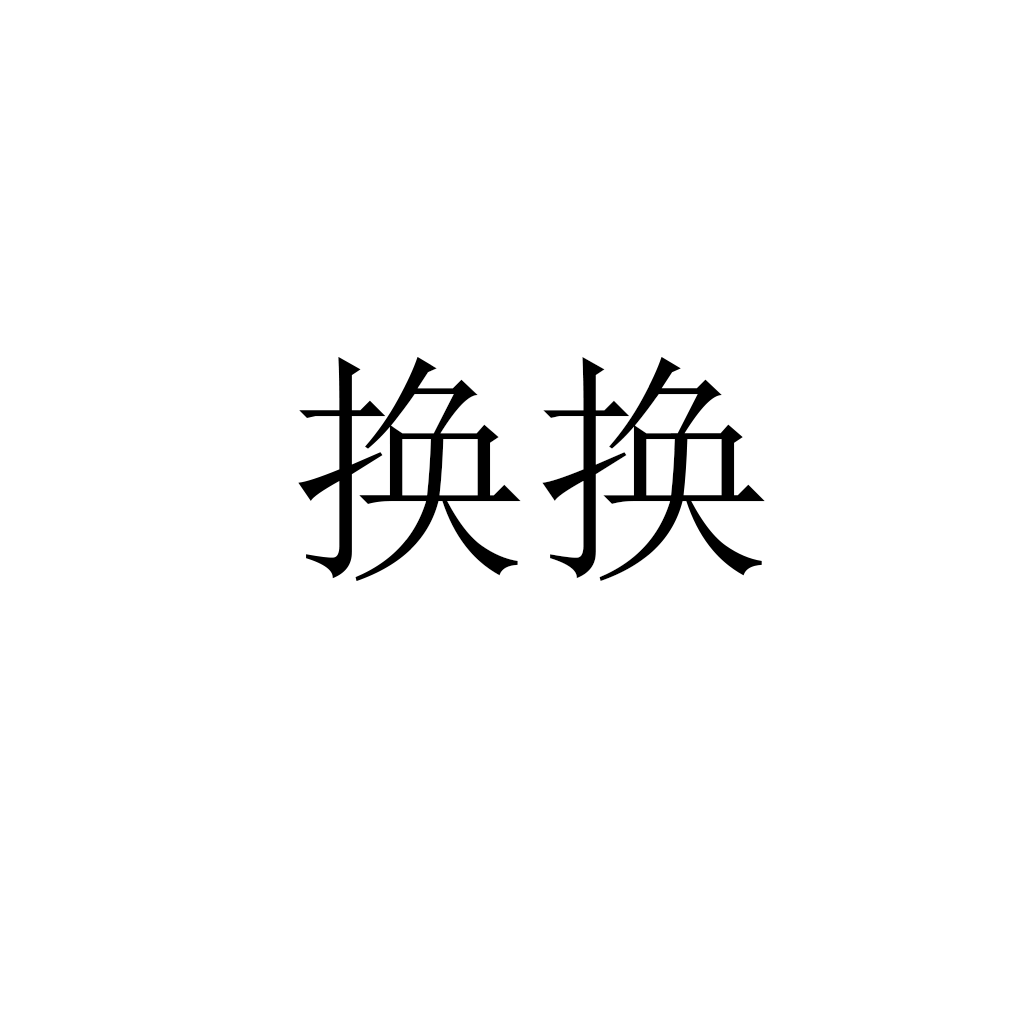
<style>
.page{position:relative;width:1024px;height:1024px;background:#ffffff}
.page>*{position:absolute;margin:0}
.t1{font:244px "SimSun";color:#000000}
</style>
<div class="page">
<p class="t1" style="left:298px;top:357px;width:467px;height:224px">换换</p>
</div>
